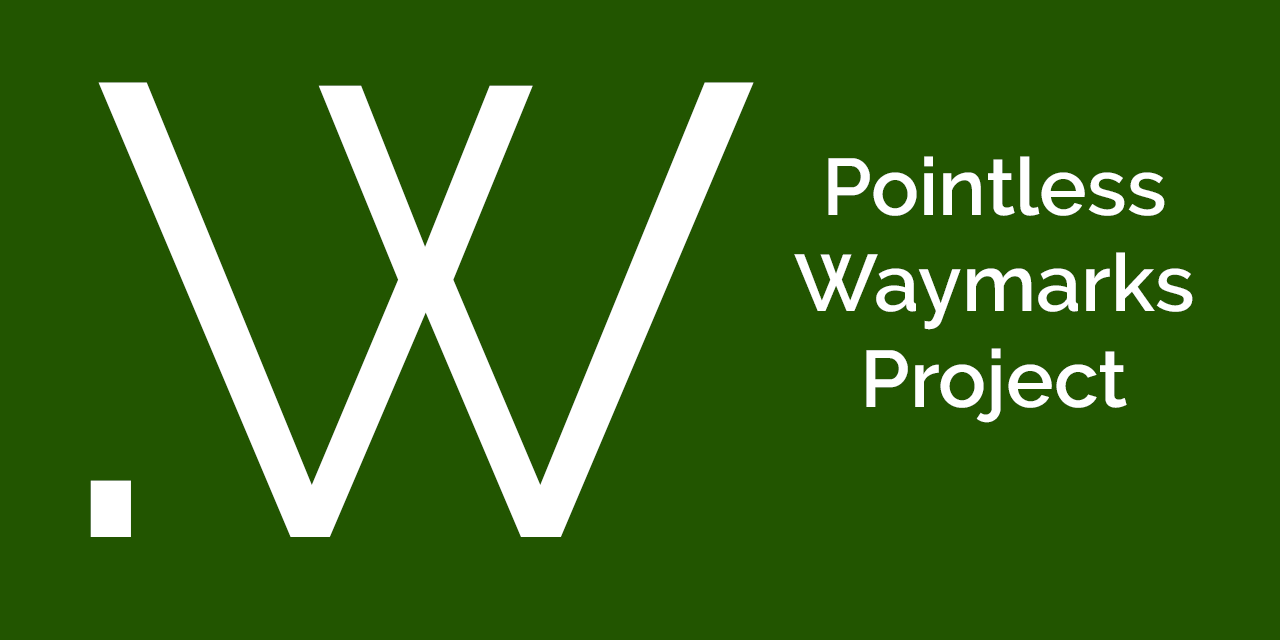
<style>
.page{position:relative;width:1280px;height:640px;background:#225500}
.page>*{position:absolute;margin:0}
.t1{font:640px "Raleway-Regular";color:#ffffff}
.t2{font:80px "Raleway-SemiBold";color:#ffffff}
.t3{font:440px "Raleway-SemiBold";color:#ffffff}
</style>
<div class="page">
<p class="t1" style="left:98px;top:82px;width:656px;height:455px">W</p>
<p class="t2" style="left:794px;top:156px;width:399px;height:267px;text-align:center">Pointless<br>Waymarks<br>Project</p>
<p class="t3" style="left:90px;top:480px;width:41px;height:57px">.</p>
</div>
